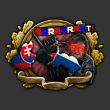
<style>
.page{position:relative;width:110px;height:110px;background:#333333}
.page>*{position:absolute;margin:0}
.t1{font:7.9px "CopperplateGothic-Bold"}
</style>
<div class="page">
<p class="t1" style="left:35px;top:25px;width:59px;height:10px;rotate:-2deg">BRRRRRRRT!</p>
</div>
